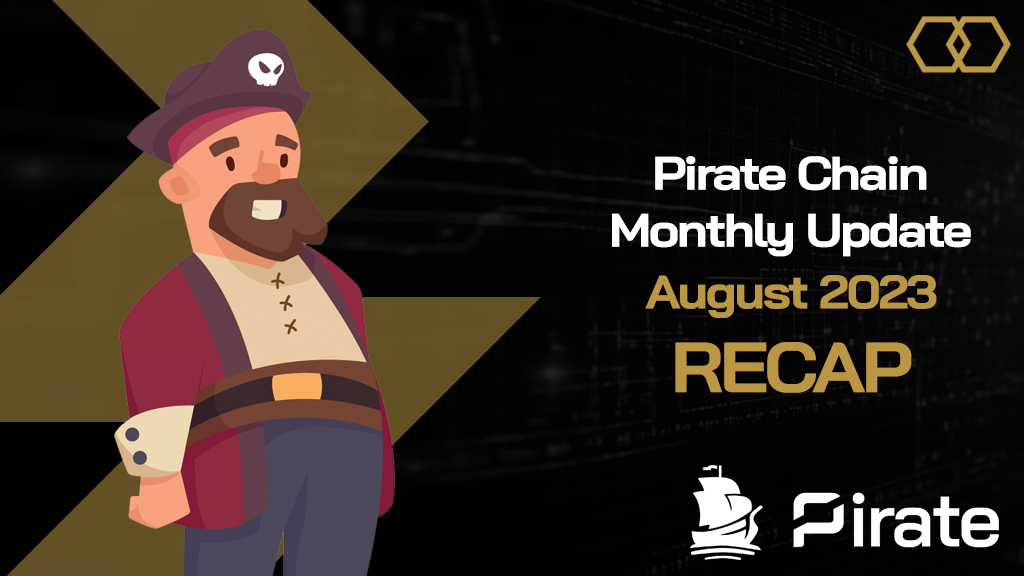
<style>
.page{position:relative;width:1024px;height:576px}
.page>*{position:absolute;margin:0}
.t1{font:46.9px "BaiJamjuree-Bold";letter-spacing:-0.05em;color:#ffffff;scale:1.1 1}
.t2{font:46.9px "BaiJamjuree-Bold";letter-spacing:-0.05em;color:#bb9645;scale:1.1 1}
.t3{font:70.7px "BaiJamjuree-Bold";letter-spacing:-0.05em;color:#bb9645;text-transform:uppercase;scale:1.1 1}
</style>
<div class="page">
<p class="t1" style="left:655px;top:156px;width:272px;height:35px">Pirate Chain</p>
<p class="t1" style="left:612px;top:213px;width:359px;height:44px">Monthly Update</p>
<p class="t2" style="left:645px;top:275px;width:292px;height:43px">August 2023</p>
<p class="t3" style="left:675px;top:342px;width:237px;height:51px">recap</p>
</div>
